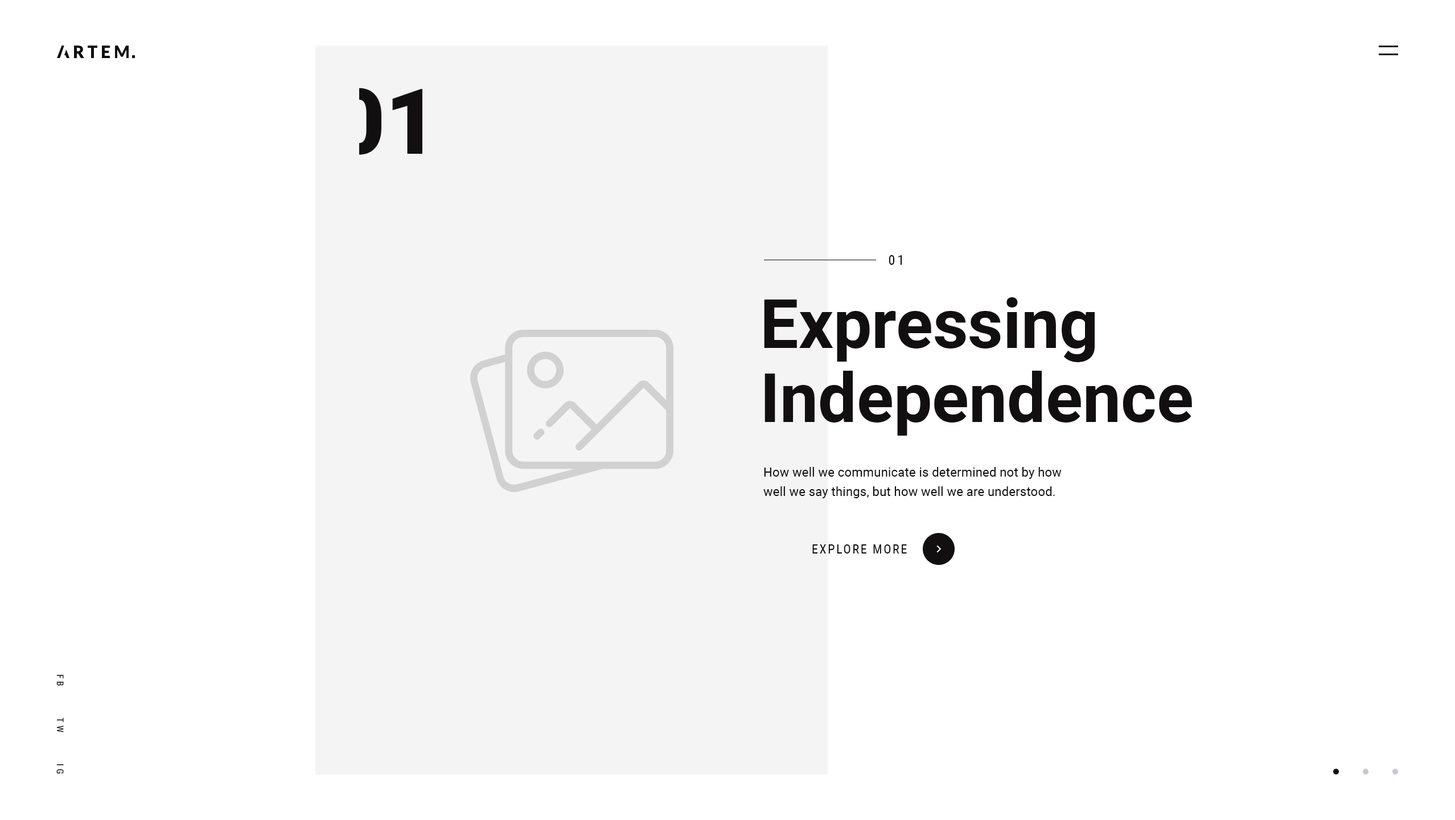
<style>
.page{position:relative;width:1455px;height:820px;background:#ffffff}
.page>*{position:absolute;margin:0}
.t1{font:13.7px "RobotoCondensed-Regular";letter-spacing:0.18em;color:#110f10;text-transform:uppercase}
.t2{font:68.3px/74px "Roboto-Bold";color:#110f10}
.t3{font:12.5px/19.4px "Roboto-Regular";letter-spacing:0.01em;color:#110f10}
.t4{font:12.5px "RobotoCondensed-Regular";letter-spacing:0.12em;color:#110f10;text-transform:uppercase}
.t5{font:9.1px "RobotoCondensed-Regular";letter-spacing:0.3em;color:#110f10;text-transform:uppercase}
</style>
<div class="page">
<p class="t1" style="left:889px;top:255px;width:13px;height:10px">01</p>
<p class="t2" style="left:764px;top:297px;width:428px;height:138px">Expressing<br>Independence</p>
<p class="t3" style="left:763px;top:467px;width:299px;height:31px">How well we communicate is determined not by how well we say things, but how well we are understood.</p>
<p class="t4" style="left:812px;top:544px;width:95px;height:9px">Explore more</p>
<p class="t5" style="left:56px;top:674px;width:8px;height:100px;rotate:90deg">Fb      Tw      Ig</p>
</div>
